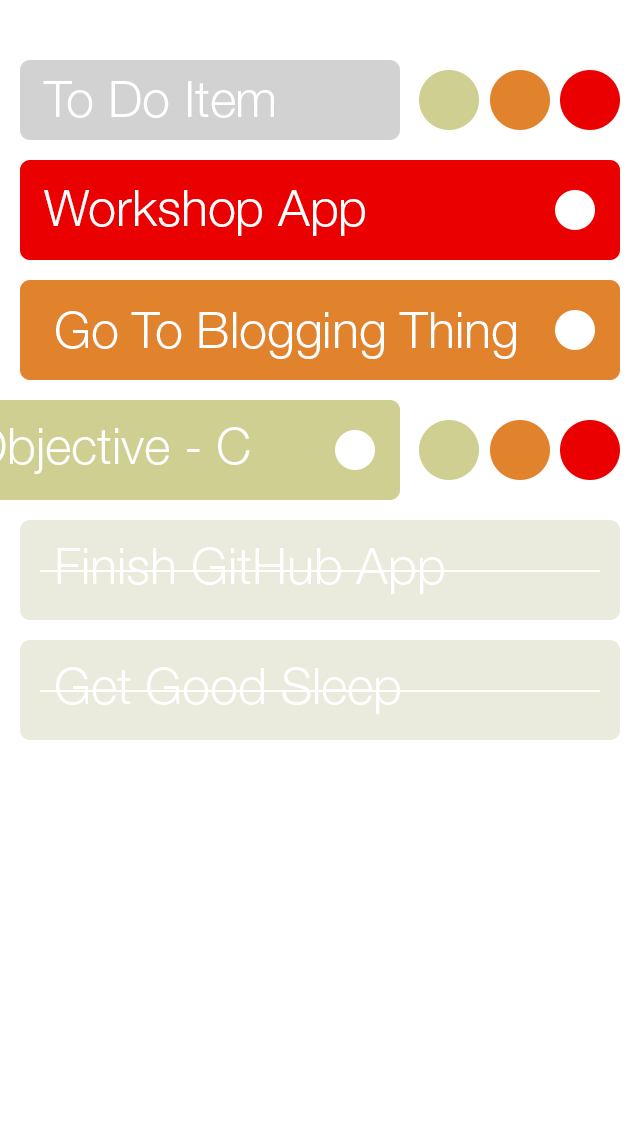
<style>
.page{position:relative;width:640px;height:1136px;background:#ffffff}
.page>*{position:absolute;margin:0}
.t1{font:50px "HelveticaNeueLTStd-Lt";color:#ffffff}
</style>
<div class="page">
<p class="t1" style="left:43px;top:81px;width:231px;height:37px">To Do Item</p>
<p class="t1" style="left:44px;top:190px;width:321px;height:46px">Workshop App</p>
<p class="t1" style="left:56px;top:311px;width:460px;height:48px">Go To Blogging Thing</p>
<p class="t1" style="left:57px;top:547px;width:387px;height:47px">Finish GitHub App</p>
<p class="t1" style="left:56px;top:667px;width:344px;height:47px">Get Good Sleep</p>
</div>
